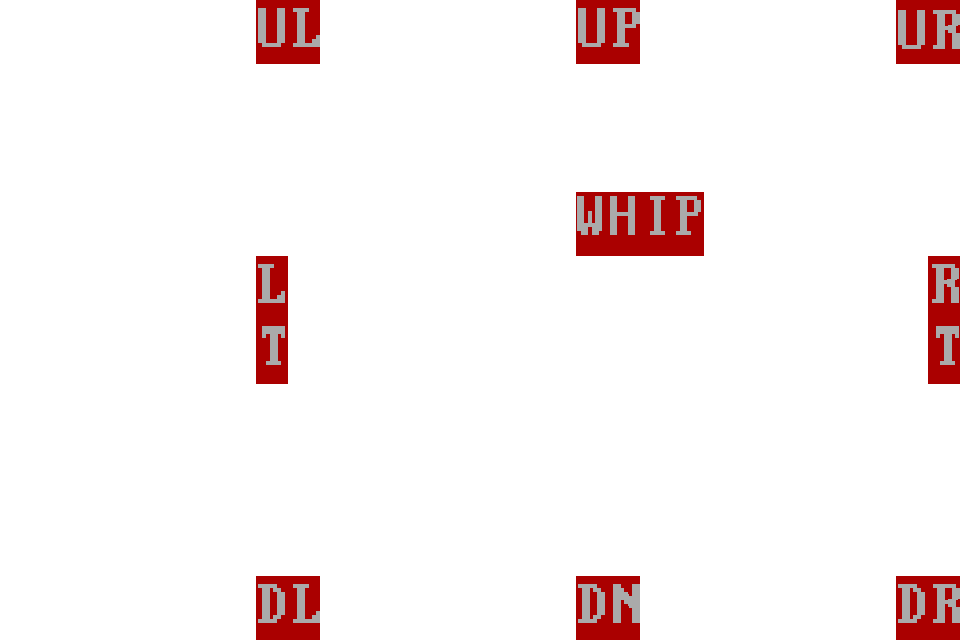
<style>
.page{position:relative;width:960px;height:640px;background:#ffffff}
.page>*{position:absolute;margin:0}
.t1{font:62.3px "PerfectDOSVGA437Win";color:#aaaaaa}
.t2{font:62.3px "PerfectDOSVGA437Win";color:#aaaaaa;scale:0.94 1}
.t3{font:62.3px/62.3px "PerfectDOSVGA437Win";color:#aaaaaa}
.t4{font:62.3px/61.8px "PerfectDOSVGA437Win";color:#aaaaaa}
</style>
<div class="page">
<p class="t1" style="left:258px;top:8px;width:62px;height:39px">UL</p>
<p class="t1" style="left:578px;top:8px;width:62px;height:39px">UP</p>
<p class="t1" style="left:898px;top:10px;width:62px;height:39px">UR</p>
<p class="t2" style="left:577px;top:196px;width:124px;height:39px">WHIP</p>
<p class="t3" style="left:258px;top:264px;width:27px;height:101px">L<br>T</p>
<p class="t4" style="left:932px;top:264px;width:27px;height:101px">R<br>T</p>
<p class="t1" style="left:258px;top:584px;width:62px;height:39px">DL</p>
<p class="t1" style="left:578px;top:584px;width:62px;height:39px">DN</p>
<p class="t1" style="left:898px;top:584px;width:62px;height:39px">DR</p>
</div>
